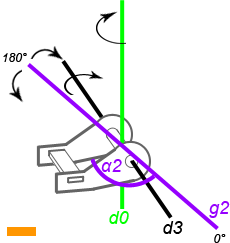
<style>
.page{position:relative;width:230px;height:243px;background:#ffffff}
.page>*{position:absolute;margin:0}
.t1{font:12px "Arial-ItalicMT";color:#000000}
.t2{font:18px "Arial-ItalicMT";color:#9600ff}
.t3{font:18px "Arial-ItalicMT";color:#00ff00}
.t4{font:18px "Arial-ItalicMT";color:#000000}
</style>
<div class="page">
<p class="t1" style="left:3px;top:53px;width:24px;height:9px">180°</p>
<p class="t2" style="left:101px;top:159px;width:21px;height:13px">α2</p>
<p class="t2" style="left:209px;top:201px;width:21px;height:17px">g2</p>
<p class="t3" style="left:109px;top:211px;width:20px;height:13px">d0</p>
<p class="t4" style="left:163px;top:221px;width:20px;height:13px">d3</p>
<p class="t1" style="left:214px;top:234px;width:12px;height:9px">0°</p>
</div>
